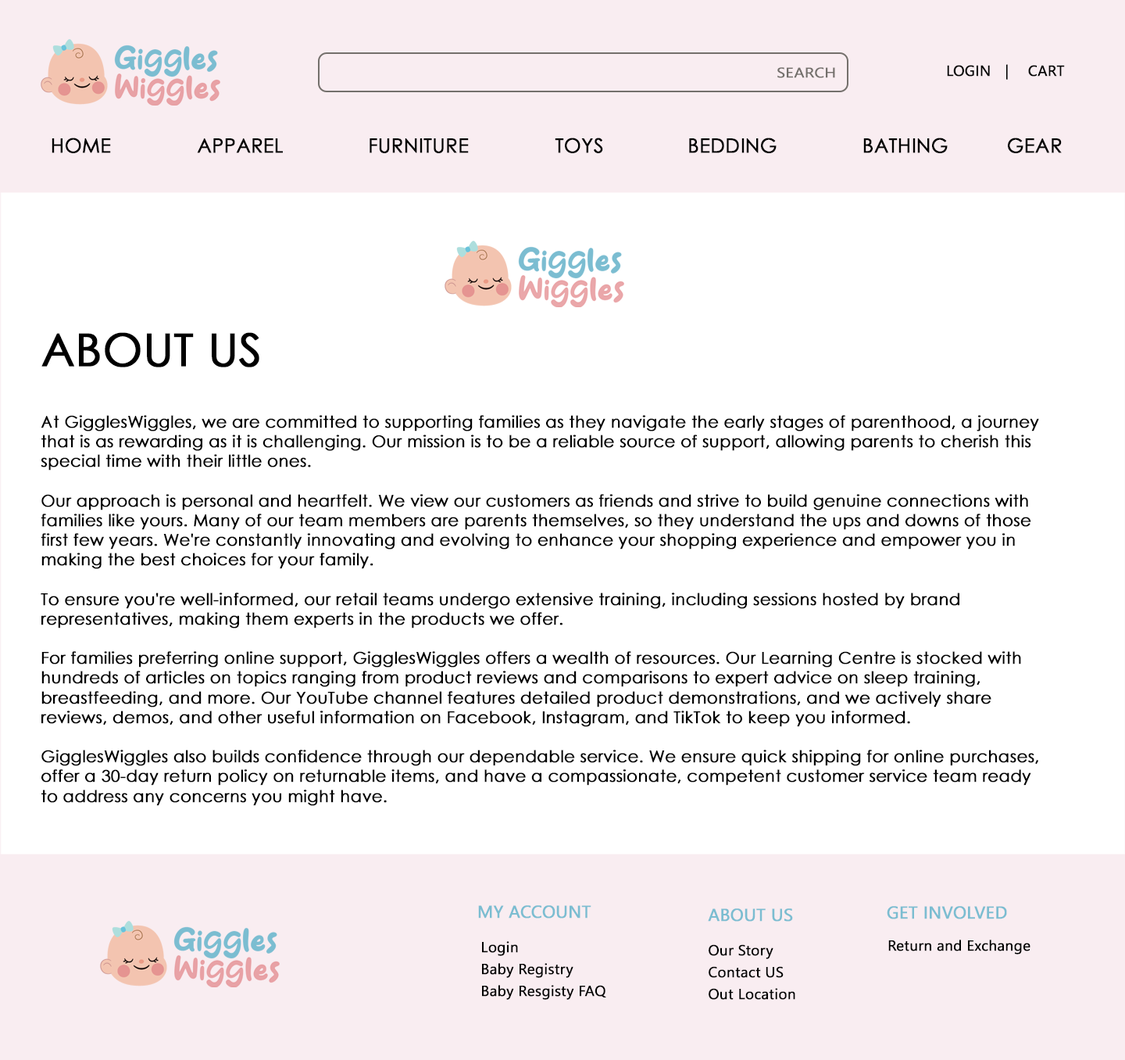
<style>
.page{position:relative;width:1125px;height:1060px;background:#ffffff}
.page>*{position:absolute;margin:0}
.t1{font:19.5px "CenturyGothic";color:#000000;font-weight:bold}
.t2{font:45.1px "CenturyGothic";color:#000000;font-weight:bold}
.t3{font:16.4px "CenturyGothic";color:#000000;font-weight:bold}
</style>
<div class="page">
<p class="t1" style="left:52px;top:138px;width:59px;height:15px">HOME</p>
<p class="t1" style="left:555px;top:138px;width:48px;height:15px">TOYS</p>
<p class="t1" style="left:689px;top:138px;width:88px;height:15px">BEDDING</p>
<p class="t1" style="left:864px;top:138px;width:84px;height:15px">BATHING</p>
<p class="t1" style="left:1008px;top:138px;width:54px;height:15px">GEAR</p>
<p class="t1" style="left:197px;top:138px;width:86px;height:15px">APPAREL</p>
<p class="t1" style="left:370px;top:138px;width:99px;height:15px">FURNITURE</p>
<p class="t2" style="left:41px;top:332px;width:218px;height:35px">ABOUT US</p>
<p class="t3" style="left:41px;top:415px;width:998px;height:391px">At GigglesWiggles, we are committed to supporting families as they navigate the early stages of parenthood, a journey that is as rewarding as it is challenging. Our mission is to be a reliable source of support, allowing parents to cherish this special time with their little ones.<br><br>Our approach is personal and heartfelt. We view our customers as friends and strive to build genuine connections with families like yours. Many of our team members are parents themselves, so they understand the ups and downs of those first few years. We're constantly innovating and evolving to enhance your shopping experience and empower you in making the best choices for your family.<br><br>To ensure you're well-informed, our retail teams undergo extensive training, including sessions hosted by brand representatives, making them experts in the products we offer.<br><br>For families preferring online support, GigglesWiggles offers a wealth of resources. Our Learning Centre is stocked with hundreds of articles on topics ranging from product reviews and comparisons to expert advice on sleep training, breastfeeding, and more. Our YouTube channel features detailed product demonstrations, and we actively share reviews, demos, and other useful information on Facebook, Instagram, and TikTok to keep you informed.<br><br>GigglesWiggles also builds confidence through our dependable service. We ensure quick shipping for online purchases, offer a 30-day return policy on returnable items, and have a compassionate, competent customer service team ready to address any concerns you might have.</p>
</div>
